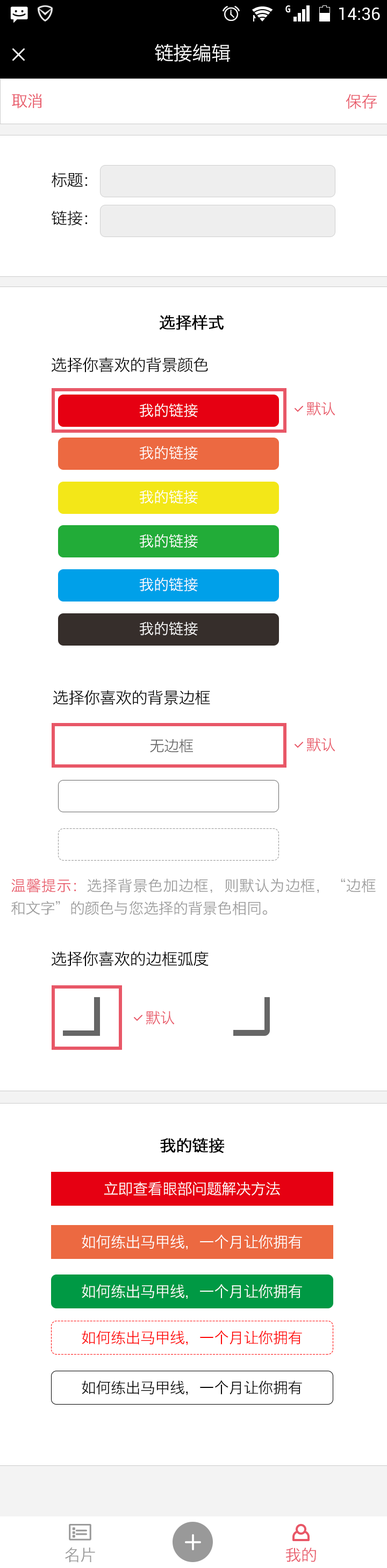
<style>
.page{position:relative;width:387px;height:1568px;background:#ffffff}
.page>*{position:absolute;margin:0}
.t1{font:19.4px "HiraginoSansGB-W3";letter-spacing:-0.02em;color:#ffffff}
.t2{font:16.1px "HiraginoSansGB-W3";letter-spacing:-0.02em;color:#e85767}
.t3{font:16.1px "HiraginoSansGB-W3";letter-spacing:-0.02em;color:#000000}
.t4{font:16.1px "HiraginoSansGB-W3";letter-spacing:-0.02em;color:#000000;font-weight:bold}
.t5{font:15.1px "HiraginoSansGB-W3";letter-spacing:-0.02em;color:#e85767}
.t6{font:15.1px "HiraginoSansGB-W3";letter-spacing:-0.02em;color:#ffffff}
.t7{font:15.1px "HiraginoSansGB-W3";letter-spacing:-0.02em;color:#666666}
.t8{font:15.1px/22.6px "HiraginoSansGB-W3";letter-spacing:-0.02em;color:#999999}
.t9{font:15.1px/22.6px "HiraginoSansGB-W3";letter-spacing:-0.02em;color:#e85767}
.t10{font:15.1px "HiraginoSansGB-W3";letter-spacing:-0.02em;color:#ff0000}
.t11{font:15.1px "HiraginoSansGB-W3";letter-spacing:-0.02em;color:#000000}
.t12{font:16.1px "HiraginoSansGB-W3";letter-spacing:-0.02em;color:#999999}
</style>
<div class="page">
<p class="t1" style="left:155px;top:44px;width:75px;height:18px">链接编辑</p>
<p class="t2" style="left:12px;top:94px;width:30px;height:15px">取消</p>
<p class="t2" style="left:346px;top:94px;width:31px;height:15px">保存</p>
<p class="t3" style="left:52px;top:173px;width:35px;height:15px">标题：</p>
<p class="t3" style="left:51px;top:211px;width:36px;height:15px">链接：</p>
<p class="t4" style="left:159px;top:315px;width:65px;height:15px">选择样式</p>
<p class="t3" style="left:51px;top:357px;width:157px;height:16px">选择你喜欢的背景颜色</p>
<p class="t5" style="left:307px;top:402px;width:28px;height:14px">默认</p>
<p class="t6" style="left:139px;top:403px;width:59px;height:15px">我的链接</p>
<p class="t6" style="left:139px;top:446px;width:59px;height:14px">我的链接</p>
<p class="t6" style="left:139px;top:490px;width:59px;height:14px">我的链接</p>
<p class="t6" style="left:139px;top:534px;width:59px;height:14px">我的链接</p>
<p class="t6" style="left:139px;top:577px;width:59px;height:15px">我的链接</p>
<p class="t6" style="left:139px;top:621px;width:59px;height:15px">我的链接</p>
<p class="t3" style="left:53px;top:690px;width:157px;height:15px">选择你喜欢的背景边框</p>
<p class="t5" style="left:307px;top:738px;width:28px;height:13px">默认</p>
<p class="t7" style="left:150px;top:739px;width:43px;height:14px">无边框</p>
<p class="t8" style="left:11px;top:878px;width:365px;height:37px;text-align:justify"><span class="t9">温馨提示：</span>选择背景色加边框，则默认为边框，“边框和文字”的颜色与您选择的背景色相同。</p>
<p class="t3" style="left:51px;top:951px;width:158px;height:15px">选择你喜欢的边框弧度</p>
<p class="t5" style="left:146px;top:1011px;width:29px;height:14px">默认</p>
<p class="t4" style="left:160px;top:1138px;width:64px;height:15px">我的链接</p>
<p class="t6" style="left:104px;top:1182px;width:176px;height:14px">立即查看眼部问题解决方法</p>
<p class="t6" style="left:82px;top:1235px;width:220px;height:15px">如何练出马甲线，一个月让你拥有</p>
<p class="t6" style="left:82px;top:1284px;width:220px;height:15px">如何练出马甲线，一个月让你拥有</p>
<p class="t10" style="left:82px;top:1330px;width:220px;height:15px">如何练出马甲线，一个月让你拥有</p>
<p class="t11" style="left:82px;top:1380px;width:220px;height:15px">如何练出马甲线，一个月让你拥有</p>
<p class="t12" style="left:65px;top:1547px;width:30px;height:16px">名片</p>
<p class="t2" style="left:286px;top:1548px;width:30px;height:14px">我的</p>
</div>
